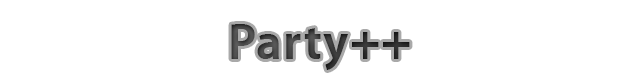
<style>
.page{position:relative;width:640px;height:80px;background:#ffffff}
.page>*{position:absolute;margin:0}
.t1{font:51.1px "MyriadApple-Bold";letter-spacing:0.025em;color:#474747}
</style>
<div class="page">
<p class="t1" style="left:231px;top:24px;width:179px;height:46px">Party++</p>
</div>
